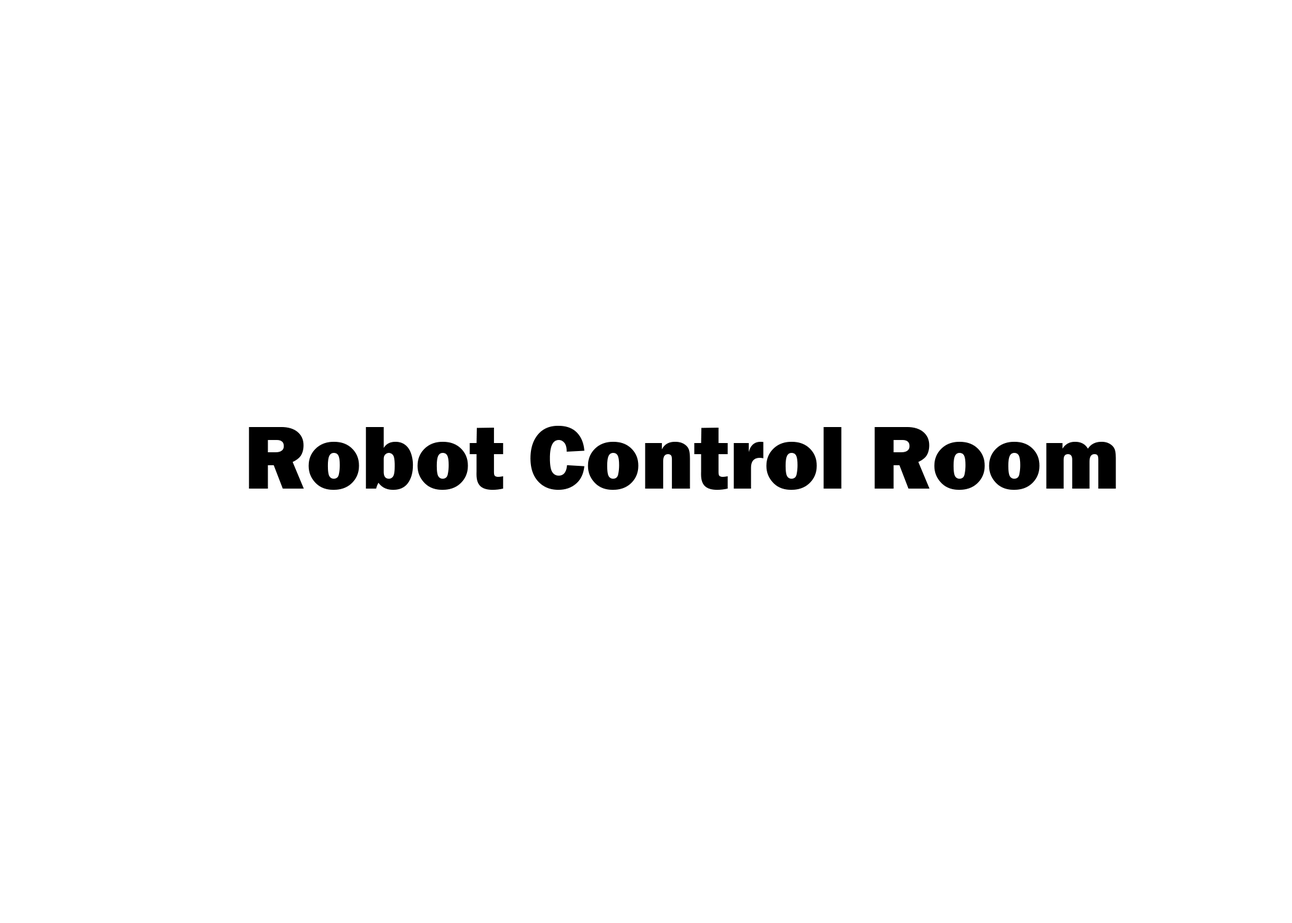
<style>
.page{position:relative;width:1292px;height:923px;background:#ffffff}
.page>*{position:absolute;margin:0}
.t1{font:92.3px "FranklinGothic-Heavy";color:#000000}
</style>
<div class="page">
<p class="t1" style="left:249px;top:426px;width:867px;height:64px">Robot Control Room</p>
</div>
